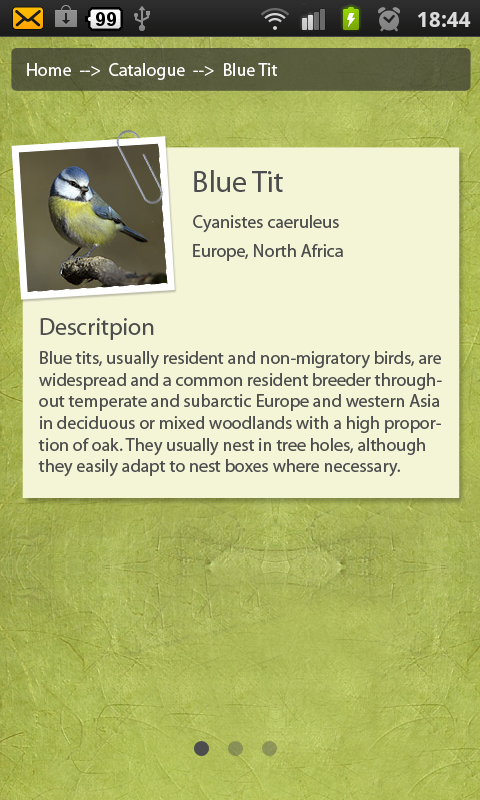
<style>
.page{position:relative;width:480px;height:800px;background:#f4f4d7}
.page>*{position:absolute;margin:0}
.t1{font:18px "MyriadPro-Regular";color:#ffffff}
.t2{font:30px "MyriadPro-Regular";color:#4d4d4d}
.t3{font:18px "MyriadPro-Regular";color:#4d4d4d}
.t4{font:24px "MyriadPro-Regular";color:#4d4d4d}
</style>
<div class="page">
<p class="t1" style="left:27px;top:63px;width:251px;height:17px">Home  --&gt;  Catalogue  --&gt;  Blue Tit</p>
<p class="t2" style="left:194px;top:170px;width:89px;height:22px">Blue Tit</p>
<p class="t3" style="left:193px;top:215px;width:146px;height:18px">Cyanistes caeruleus</p>
<p class="t3" style="left:193px;top:244px;width:150px;height:17px">Europe, North Africa</p>
<p class="t4" style="left:40px;top:318px;width:114px;height:22px">Descritpion</p>
<p class="t3" style="left:38px;top:351px;width:404px;height:126px">Blue tits, usually resident and non-migratory birds, are widespread and a common resident breeder throughout temperate and subarctic Europe and western Asia in deciduous or mixed woodlands with a high proportion of oak. They usually nest in tree holes, although they easily adapt to nest boxes where necessary.</p>
</div>
